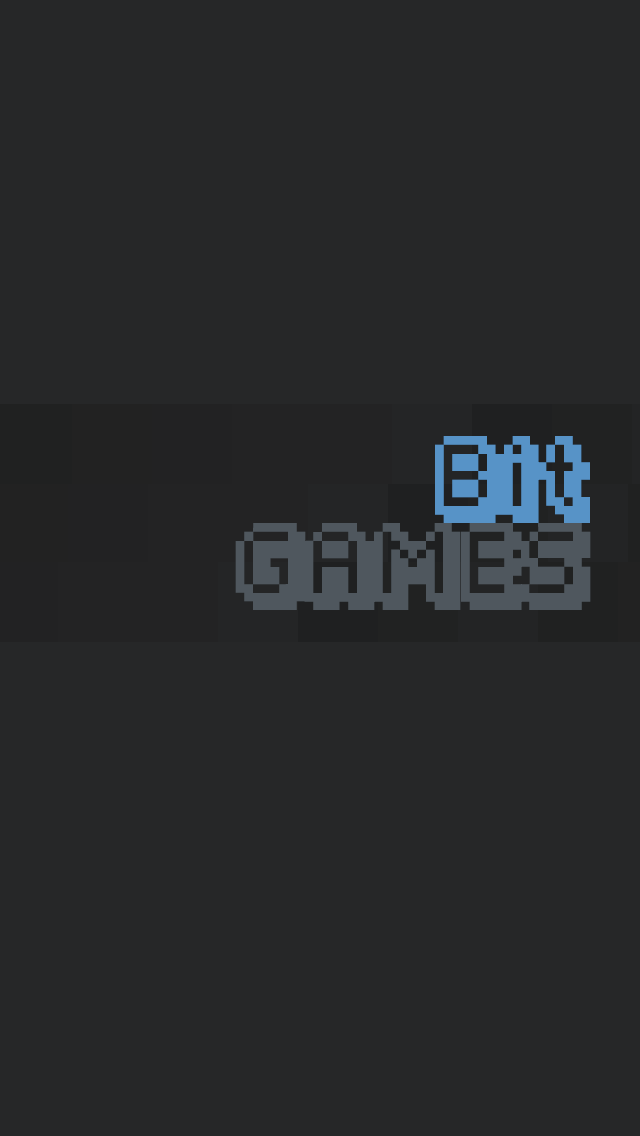
<style>
.page{position:relative;width:640px;height:1136px;background:#262728}
.page>*{position:absolute;margin:0}
.t1{font:69.2px "Fipps-Regular";color:#5793c7}
.t2{font:69.2px "Fipps-Regular";color:#4f575e;text-transform:uppercase}
</style>
<div class="page">
<p class="t1" style="left:435px;top:436px;width:155px;height:87px">Bit</p>
<p class="t2" style="left:235px;top:523px;width:356px;height:87px">Games</p>
</div>
